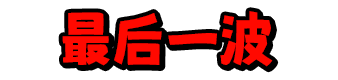
<style>
.page{position:relative;width:338px;height:80px;background:#ffffff}
.page>*{position:absolute;margin:0}
.t1{font:62px "NishikitekiBold-Regular";letter-spacing:-0.04em;color:#ff0900;text-transform:uppercase}
</style>
<div class="page">
<p class="t1" style="left:62px;top:11px;width:211px;height:56px">最后一波</p>
</div>
